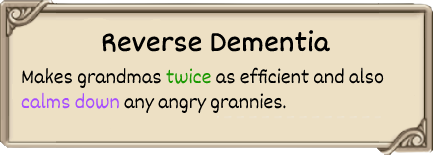
<style>
.page{position:relative;width:433px;height:155px;background:#ede0c4}
.page>*{position:absolute;margin:0}
.t1{font:30px "Dekko";color:#000000;font-weight:bold}
.t2{font:21px "Dekko";color:#000000}
.t3{font:21px "Dekko";color:#1b9902}
.t4{font:21px "Dekko";color:#a74fff}
</style>
<div class="page">
<p class="t1" style="left:102px;top:30px;width:228px;height:22px">Reverse Dementia</p>
<p class="t2" style="left:21px;top:67px;width:363px;height:47px">Makes grandmas <span class="t3">twice </span>as efficient and also <br><span class="t4">calms down </span>any angry grannies.</p>
</div>
